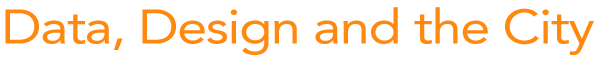
<style>
.page{position:relative;width:600px;height:80px;background:#ffffff}
.page>*{position:absolute;margin:0}
.t1{font:48px "Avenir-Roman";letter-spacing:-0.025em;color:#ff890f;scale:1.12 1}
</style>
<div class="page">
<p class="t1" style="left:5px;top:7px;width:589px;height:48px">Data, Design and the City</p>
</div>
